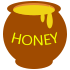
<style>
.page{position:relative;width:70px;height:70px;background:#a04b00}
.page>*{position:absolute;margin:0}
.t1{font:13.6px "MalgunGothicRegular";letter-spacing:-0.03em;color:#f6ff00}
</style>
<div class="page">
<p class="t1" style="left:11px;top:32px;width:47px;height:14px">HONEY</p>
</div>
